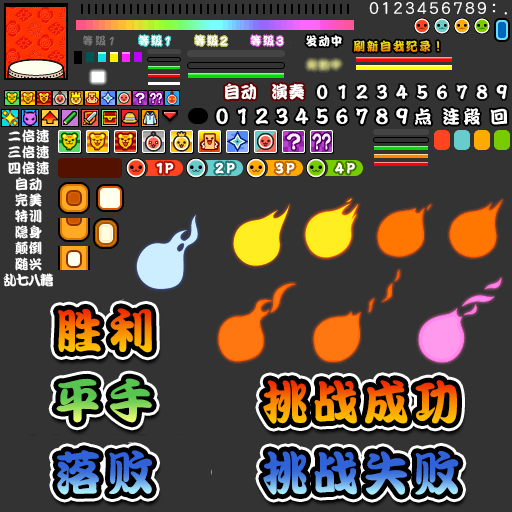
<style>
.page{position:relative;width:512px;height:512px;background:#333333}
.page>*{position:absolute;margin:0}
.t1{font:11px "DFPKanTingLiuW9";letter-spacing:0.2em;color:#777777;scale:0.96 1}
.t2{font:12.6px "DFPKanTingLiuW9";letter-spacing:0.2em;color:#777777;scale:0.83 1}
.t3{font:11px "DFPKanTingLiuW9";letter-spacing:0.2em;color:#ffffff;scale:0.96 1}
.t4{font:12.6px "DFPKanTingLiuW9";letter-spacing:0.2em;color:#ffffff;scale:0.83 1}
.t5{font:13.2px "DFPKanTingLiuW9";letter-spacing:0.2em;color:#ffffff;scale:0.8 1}
.t6{font:12px "DFPKanTingLiuW9";letter-spacing:0.08em;color:#ffffff;scale:0.96 1}
.t7{font:12px "DFPKanTingLiuW9";letter-spacing:0.14em;scale:0.96 1}
.t8{font:12px "DFPKanTingLiuW9";letter-spacing:0.04em;scale:0.96 1}
.t9{font:17px "DFPKanTingLiuW9";letter-spacing:0.04em;color:#ffffff;scale:0.96 1}
.t10{font:17px "DFPKanTingLiuW9";letter-spacing:0.05em;color:#ffffff;scale:0.96 1}
.t11{font:18px "DFPKanTingLiuW9";letter-spacing:0.2em;color:#ffffff;scale:0.96 1}
.t12{font:14px "DFPKanTingLiuW9";letter-spacing:0.05em;color:#ffffff;scale:0.96 1}
.t13{font:14px "DFPKanTingLiuW9";letter-spacing:-0.1em;color:#ffffff;scale:0.96 1}
.t14{font:48px "DFPKanTingLiuW9";letter-spacing:0.15em;scale:0.96 1}
.t15{font:48px "DFPKanTingLiuW9";letter-spacing:0.1em;scale:0.96 1}
</style>
<div class="page">
<p class="t1" style="left:83px;top:35px;width:31px;height:11px">等级<span class="t2">1</span></p>
<p class="t3" style="left:139px;top:35px;width:31px;height:11px">等级<span class="t4">1</span></p>
<p class="t3" style="left:195px;top:35px;width:33px;height:11px">等级<span class="t5">2</span></p>
<p class="t3" style="left:251px;top:35px;width:33px;height:11px">等级<span class="t5">3</span></p>
<p class="t6" style="left:306px;top:35px;width:36px;height:12px">发动中</p>
<p class="t7" style="left:354px;top:40px;width:86px;height:12px">刷新自我纪录<span class="t8">！</span></p>
<p class="t9" style="left:225px;top:83px;width:31px;height:17px">自动</p>
<p class="t10" style="left:272px;top:83px;width:32px;height:17px">演奏</p>
<p class="t11" style="left:443px;top:108px;width:37px;height:17px">连段</p>
<p class="t12" style="left:8px;top:129px;width:41px;height:14px">二倍速</p>
<p class="t12" style="left:8px;top:145px;width:41px;height:14px">三倍速</p>
<p class="t12" style="left:8px;top:161px;width:41px;height:14px">四倍速</p>
<p class="t12" style="left:15px;top:177px;width:27px;height:14px">自动</p>
<p class="t12" style="left:15px;top:193px;width:27px;height:14px">完美</p>
<p class="t12" style="left:15px;top:209px;width:27px;height:14px">特训</p>
<p class="t12" style="left:15px;top:225px;width:27px;height:14px">隐身</p>
<p class="t12" style="left:15px;top:241px;width:27px;height:14px">颠倒</p>
<p class="t12" style="left:15px;top:257px;width:27px;height:14px">随兴</p>
<p class="t13" style="left:3px;top:273px;width:50px;height:14px">乱七八糟</p>
<p class="t14" style="left:58px;top:308px;width:94px;height:45px">胜利</p>
<p class="t14" style="left:56px;top:378px;width:96px;height:45px">平手</p>
<p class="t15" style="left:263px;top:380px;width:194px;height:44px">挑战成功</p>
<p class="t14" style="left:57px;top:450px;width:95px;height:45px">落败</p>
<p class="t15" style="left:263px;top:451px;width:196px;height:44px">挑战失败</p>
</div>
